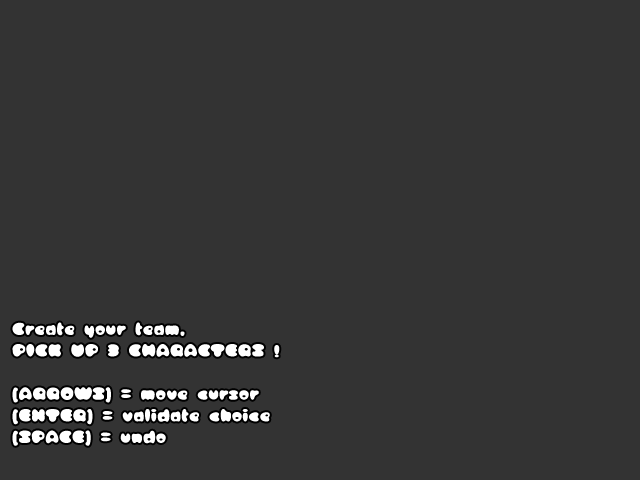
<style>
.page{position:relative;width:640px;height:480px;background:#333333}
.page>*{position:absolute;margin:0}
.t1{font:18px "ICHIGORegular";color:#ffffff}
</style>
<div class="page">
<p class="t1" style="left:12px;top:322px;width:268px;height:124px">Create your team,<br>PICK UP 3 CHARACTERS !<br><br>[ARROWS] = move cursor<br>[ENTER] = validate choice<br>[SPACE] = undo</p>
</div>
